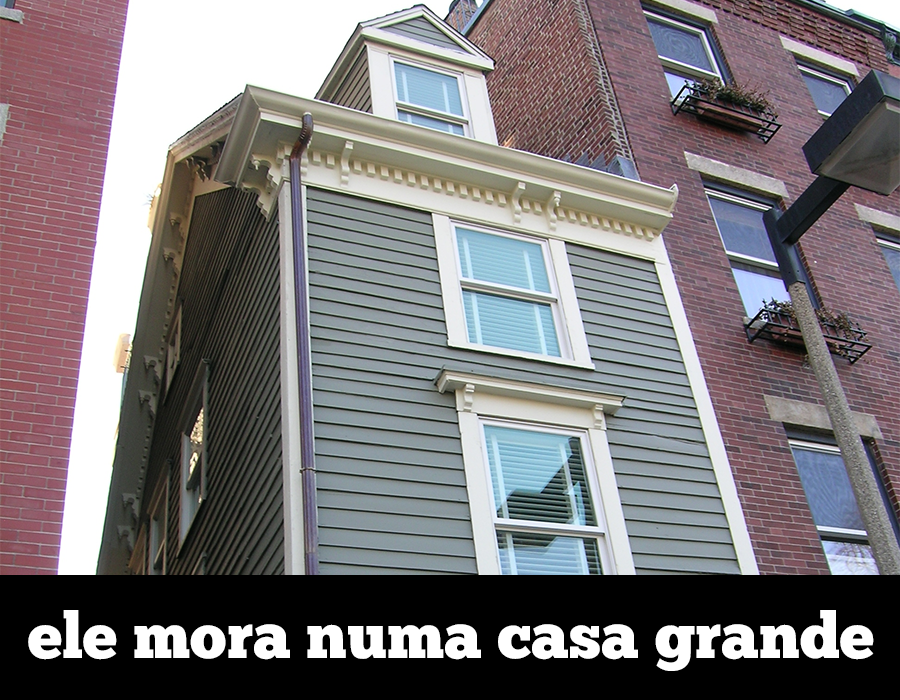
<style>
.page{position:relative;width:900px;height:700px}
.page>*{position:absolute;margin:0}
.t1{font:64px "ChunkFive-Roman";color:#ffffff}
</style>
<div class="page">
<p class="t1" style="left:28px;top:610px;width:846px;height:61px">ele mora numa casa grande</p>
</div>
